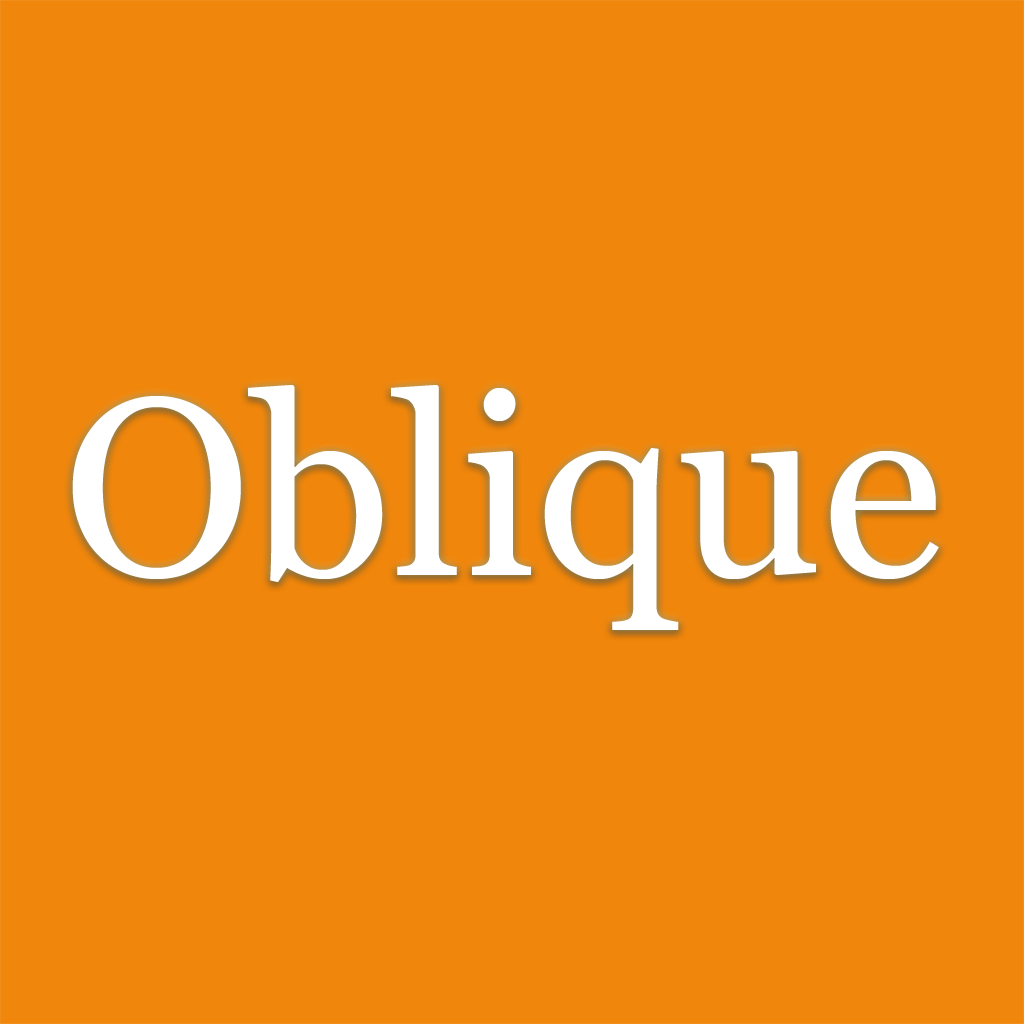
<style>
.page{position:relative;width:1024px;height:1024px;background:#f0860b}
.page>*{position:absolute;margin:0}
.t1{font:251.5px "Georgia";color:#ffffff}
</style>
<div class="page">
<p class="t1" style="left:72px;top:385px;width:867px;height:245px">Oblique</p>
</div>
